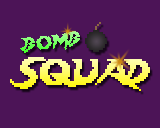
<style>
.page{position:relative;width:160px;height:128px;background:#4c1457}
.page>*{position:absolute;margin:0}
.t1{font:16px "Lady-Radical"}
.t2{font:32px "Lady-Radical"}
</style>
<div class="page">
<p class="t1" style="left:20px;top:31px;width:60px;height:22px;rotate:-7deg">BOMB</p>
<p class="t2" style="left:10px;top:57px;width:140px;height:34px">SQUAD</p>
</div>
